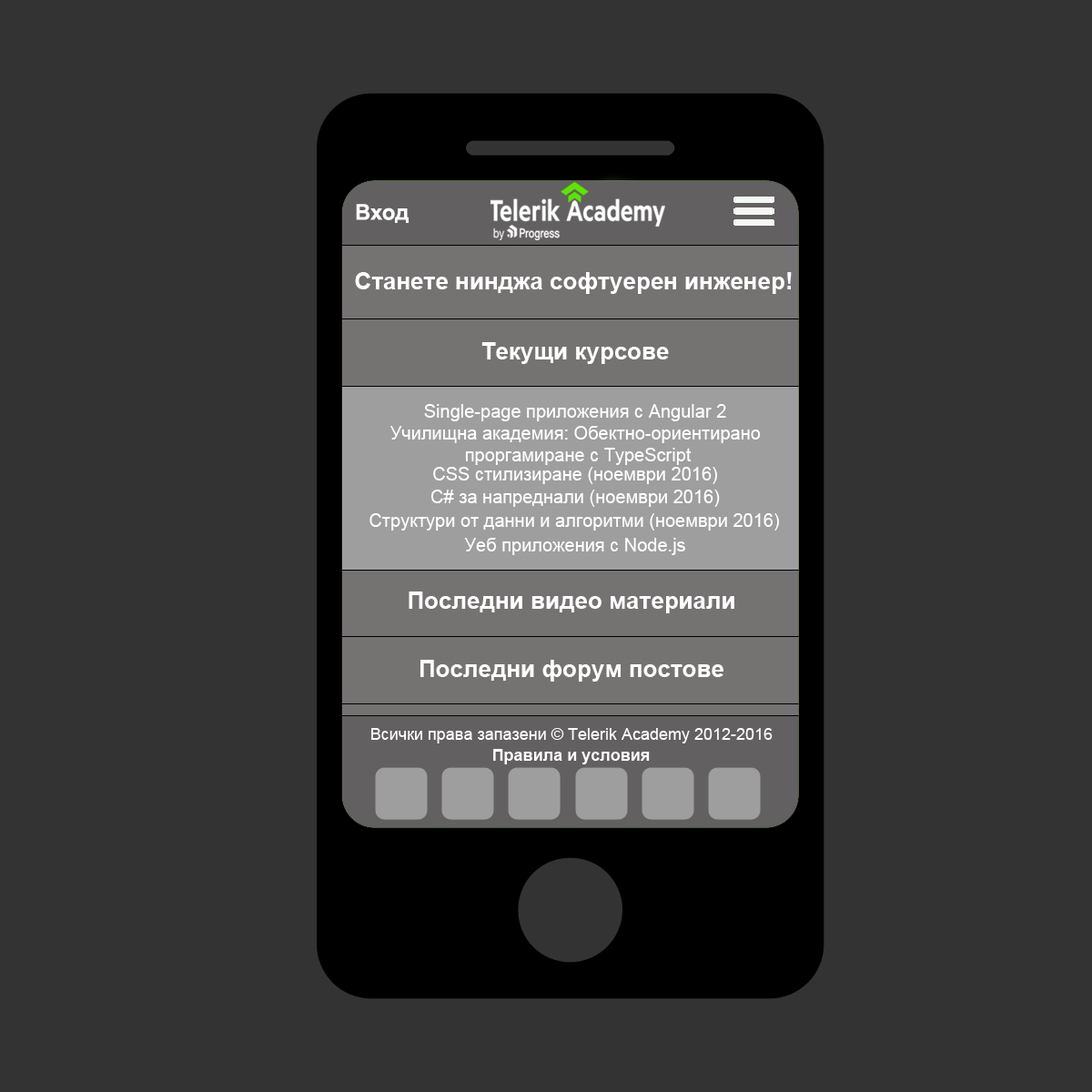
<style>
.page{position:relative;width:1092px;height:1092px;background:#333333}
.page>*{position:absolute;margin:0}
.t1{font:21.8px "Arial-BoldMT";color:#ffffff}
.t2{font:23.7px "Arial-BoldMT";color:#ffffff}
.t3{font:18.2px "ArialMT";color:#ffffff}
.t4{font:16.4px "ArialMT";color:#ffffff}
.t5{font:16.4px "Arial-BoldMT";color:#ffffff}
</style>
<div class="page">
<p class="t1" style="left:356px;top:204px;width:53px;height:19px">Вход</p>
<p class="t2" style="left:355px;top:272px;width:437px;height:22px">Станете нинджа софтуерен инженер!</p>
<p class="t2" style="left:481px;top:342px;width:188px;height:22px">Текущи курсове</p>
<p class="t3" style="left:424px;top:404px;width:302px;height:17px">Single-page приложения с Angular 2</p>
<p class="t3" style="left:390px;top:426px;width:371px;height:39px;text-align:center">Училищна академия: Обектно-ориентирано <br>проргамиране с TypeScript</p>
<p class="t3" style="left:433px;top:467px;width:284px;height:17px">CSS стилизиране (ноември 2016)</p>
<p class="t3" style="left:430px;top:490px;width:290px;height:17px">C# за напреднали (ноември 2016)</p>
<p class="t3" style="left:369px;top:513px;width:410px;height:18px">Структури от данни и алгоритми (ноември 2016)</p>
<p class="t3" style="left:464px;top:538px;width:221px;height:17px">Уеб приложения с Node.js</p>
<p class="t2" style="left:409px;top:591px;width:325px;height:22px">Последни видео материали</p>
<p class="t2" style="left:420px;top:660px;width:303px;height:22px">Последни форум постове</p>
<p class="t4" style="left:371px;top:728px;width:402px;height:15px">Всички права запазени © Telerik Academy 2012-2016</p>
<p class="t5" style="left:493px;top:749px;width:157px;height:15px">Правила и условия</p>
</div>
